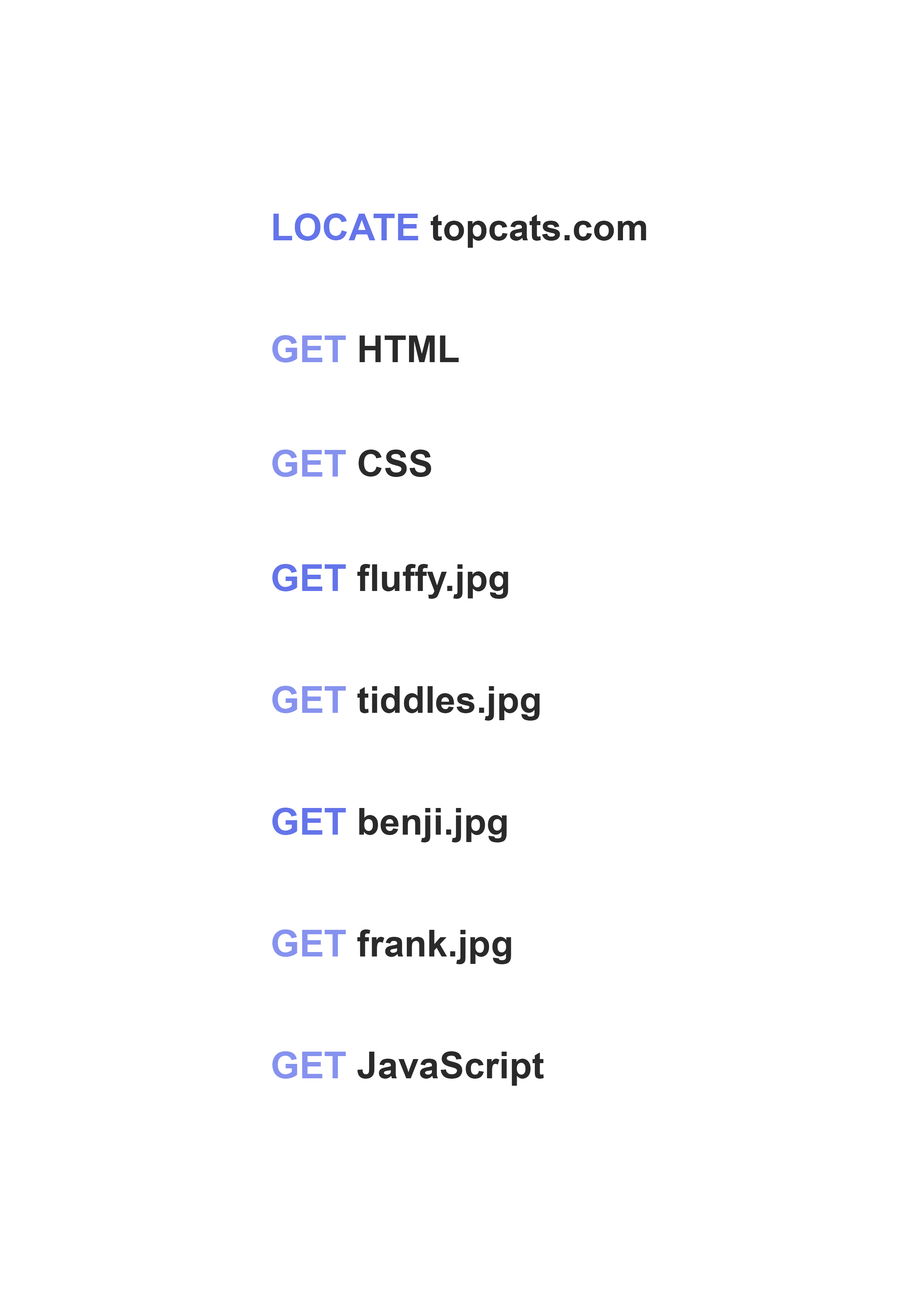
<style>
.page{position:relative;width:918px;height:1299px;background:#ffffff}
.page>*{position:absolute;margin:0}
.t1{font:37px "Arial-BoldMT";color:#2a2a2a}
.t2{font:37px "Arial-BoldMT";color:#6474ea}
.t3{font:37px "Arial-BoldMT";color:#8692ee}
</style>
<div class="page">
<p class="t1" style="left:273px;top:213px;width:373px;height:35px"><span class="t2">LOCATE</span> topcats.com</p>
<p class="t1" style="left:272px;top:335px;width:187px;height:27px"><span class="t3">GET</span> HTML</p>
<p class="t3" style="left:272px;top:449px;width:159px;height:28px">GET<span class="t1"> CSS</span></p>
<p class="t1" style="left:272px;top:564px;width:236px;height:35px"><span class="t2">GET</span> fluffy.jpg</p>
<p class="t1" style="left:272px;top:686px;width:268px;height:34px"><span class="t3">GET</span> tiddles.jpg</p>
<p class="t1" style="left:272px;top:807px;width:235px;height:35px"><span class="t2">GET</span> benji.jpg</p>
<p class="t1" style="left:272px;top:929px;width:239px;height:35px"><span class="t3">GET</span> frank.jpg</p>
<p class="t1" style="left:272px;top:1051px;width:272px;height:34px"><span class="t3">GET</span> JavaScript</p>
</div>
